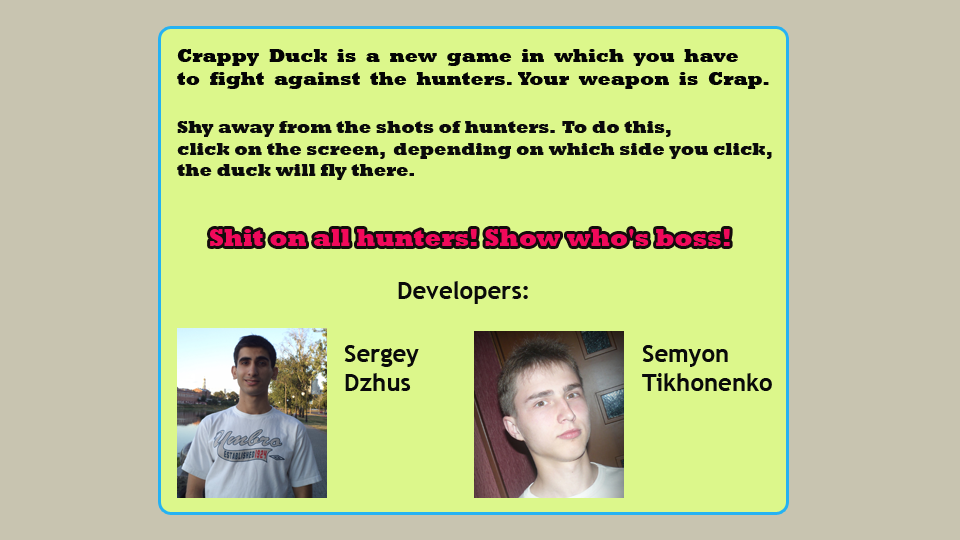
<style>
.page{position:relative;width:960px;height:540px;background:#dcf78b}
.page>*{position:absolute;margin:0}
.t1{font:19px "Rockwell-ExtraBold";color:#040404}
.t2{font:18px "Rockwell-ExtraBold";color:#0a0a0a}
.t3{font:24px "Rockwell-ExtraBold";color:#f1095b}
.t4{font:24px "TrebuchetMS-Bold";color:#0a0a0a}
</style>
<div class="page">
<p class="t1" style="left:177px;top:49px;width:592px;height:40px">Crappy  Duck  is  a  new  game  in  which  you  have  <br>to  fight  against  the  hunters.  Your  weapon  is  Crap.</p>
<p class="t2" style="left:177px;top:121px;width:595px;height:59px">Shy away from the shots of hunters.  To do this, <br>click on the screen,  depending on which side you click, <br>the duck will fly there.</p>
<p class="t3" style="left:210px;top:229px;width:520px;height:17px">Shit on all hunters! Show who's boss!</p>
<p class="t4" style="left:398px;top:281px;width:130px;height:23px">Developers:</p>
<p class="t4" style="left:344px;top:345px;width:75px;height:46px">Sergey<br>Dzhus</p>
<p class="t4" style="left:642px;top:345px;width:130px;height:46px">Semyon<br>Tikhonenko</p>
</div>
